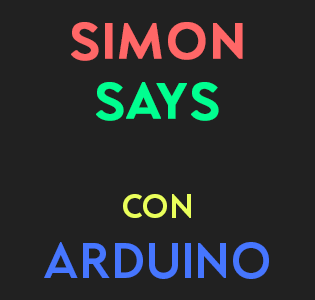
<style>
.page{position:relative;width:315px;height:300px;background:#212121}
.page>*{position:absolute;margin:0}
.t1{font:50px "Cloudsters-Regular";color:#4676ff}
.t2{font:50px "Cloudsters-Regular";color:#ff6767;font-weight:bold}
.t3{font:50px "Cloudsters-Regular";color:#00ff90;font-weight:bold}
.t4{font:33.3px "Cloudsters-Regular";color:#eaff5b}
</style>
<div class="page">
<p class="t1" style="left:44px;top:22px;width:225px;height:257px;text-align:center"><span class="t2">SIMON<br></span><span class="t3">SAYS<br><br></span><span class="t4">Con<br></span>Arduino</p>
</div>
